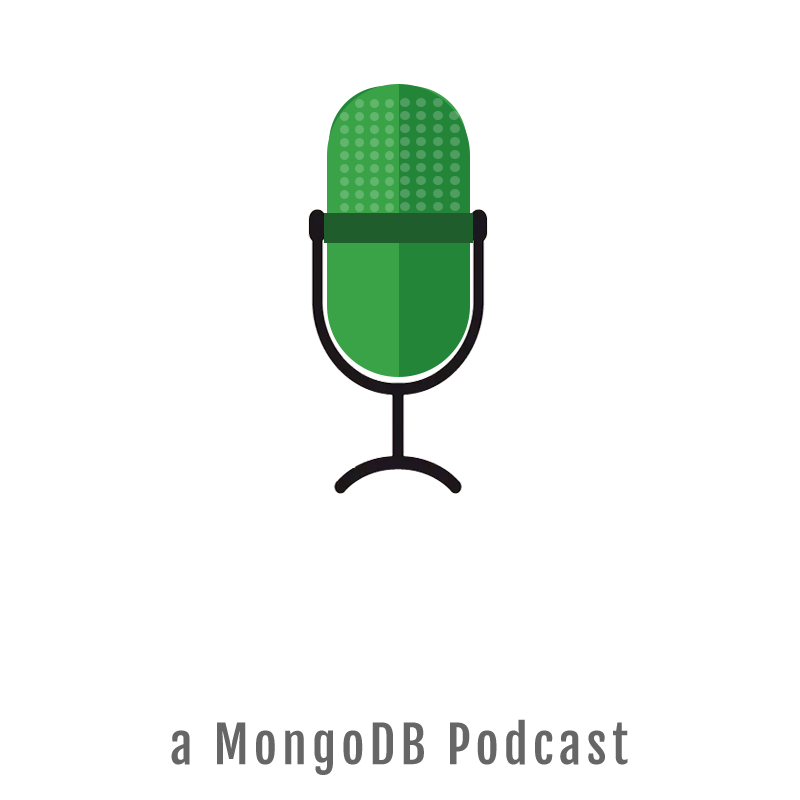
<style>
.page{position:relative;width:800px;height:800px;background:#ffffff}
.page>*{position:absolute;margin:0}
.t1{font:50px "FjallaOne-Regular";letter-spacing:0.1em;color:#666666}
</style>
<div class="page">
<p class="t1" style="left:171px;top:719px;width:457px;height:56px">a MongoDB Podcast</p>
</div>
